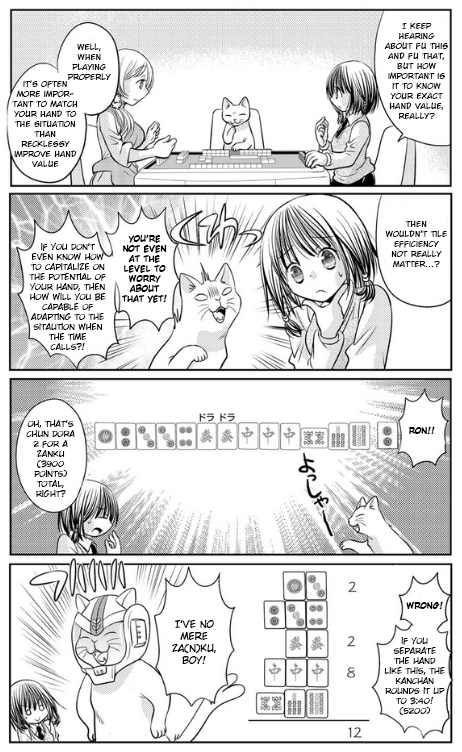
<style>
.page{position:relative;width:462px;height:752px;background:#ffffff}
.page>*{position:absolute;margin:0}
.t1{font:8.3px "CCWildWordsRoman";color:#000000}
.t2{font:8.3px "WildWordsRoman";color:#000000}
.t3{font:8.3px "Wild-Words-Bold-Bold";color:#000000}
.t4{font:10px "WildWordsRoman";color:#000000}
</style>
<div class="page">
<p class="t1" style="left:384px;top:22px;width:64px;height:97px;text-align:center">I keep hearing about fu this and fu that, but how important is it to know your exact hand value, really?</p>
<p class="t1" style="left:67px;top:43px;width:44px;height:37px;text-align:center">well, when playing properly</p>
<p class="t1" style="left:12px;top:80px;width:66px;height:87px;text-align:center">it’s often more important to match your hand to the situation than <br>recklessy improve hand value</p>
<p class="t1" style="left:385px;top:221px;width:62px;height:46px;text-align:center">then <br>wouldn’t tile efficiency not really matter...?</p>
<p class="t2" style="left:29px;top:243px;width:77px;height:107px;text-align:center">if you don’t <br>even know how to capitalize on the potential of your hand, then how will you be capable of adapting to the sitaution when the time <br>calls?!</p>
<p class="t3" style="left:121px;top:234px;width:46px;height:69px;text-align:center">you’re not even at the level to worry about that yet!</p>
<p class="t2" style="left:26px;top:420px;width:49px;height:77px;text-align:center">oh, that’s chun dora 2 for a zanku (3900 points) total, right?</p>
<p class="t3" style="left:408px;top:426px;width:27px;height:9px">ron!!</p>
<p class="t3" style="left:406px;top:601px;width:37px;height:9px">wrong!</p>
<p class="t4" style="left:172px;top:620px;width:44px;height:44px;text-align:center">I’ve no mere za(n)ku, boy!</p>
<p class="t2" style="left:384px;top:637px;width:61px;height:78px;text-align:center">if you <br>separate the hand like this, the kanchan rounds it up to 3:40! (5200)</p>
</div>
